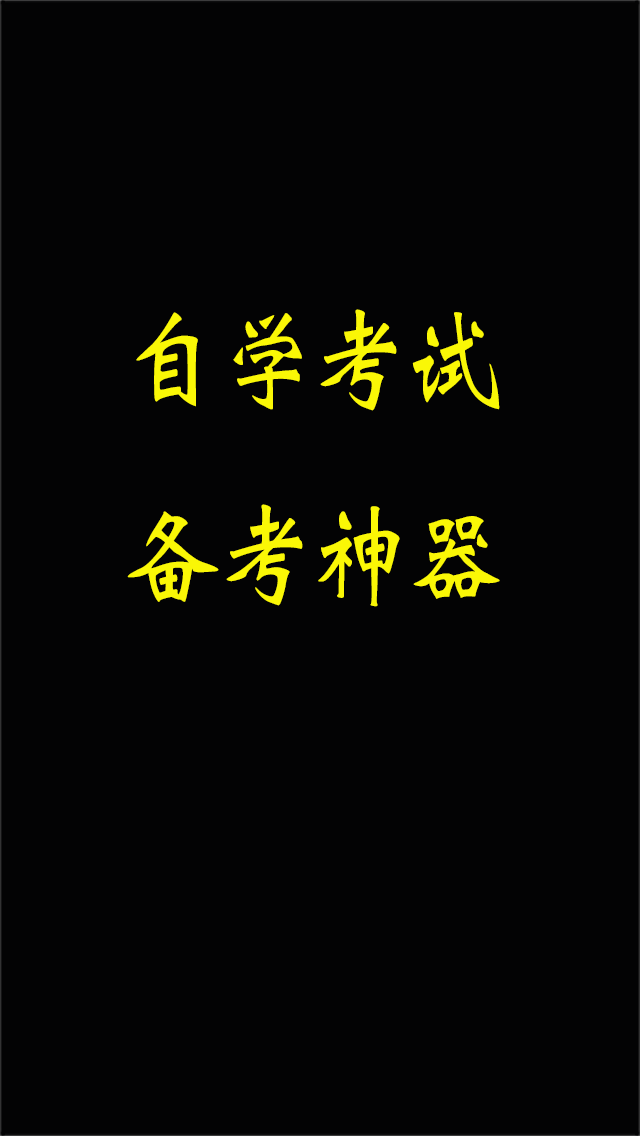
<style>
.page{position:relative;width:640px;height:1136px;background:#030304}
.page>*{position:absolute;margin:0}
.t1{font:111.2px "Weibei-SC-Bold";color:#faf706;scale:0.85 1}
</style>
<div class="page">
<p class="t1" style="left:127px;top:309px;width:373px;height:298px">自学考试<br>备考神器</p>
</div>
